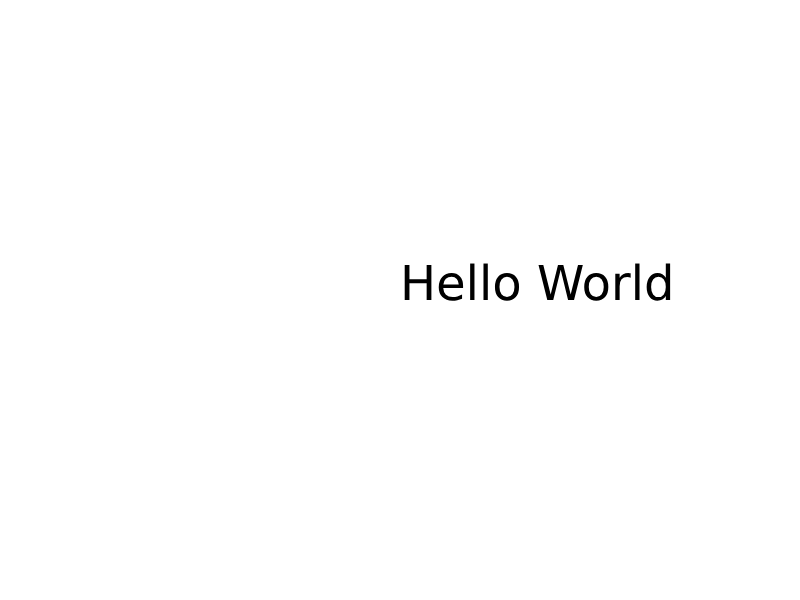
<style>
.page{position:relative;width:800px;height:600px;background:#ffffff}
.page>*{position:absolute;margin:0}
.t1{font:48px "DejaVuSans";color:#000000}
</style>
<div class="page">
<p class="t1" style="left:404px;top:263px;width:267px;height:38px">Hello World</p>
</div>
